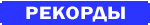
<style>
.page{position:relative;width:150px;height:25px;background:#2b35ff}
.page>*{position:absolute;margin:0}
.t1{font:18.1px "FranklinGothic-Demi";letter-spacing:0.03em;color:#ffffff;scale:1.2 1}
</style>
<div class="page">
<p class="t1" style="left:26px;top:6px;width:99px;height:16px">РЕКОРДЫ</p>
</div>
